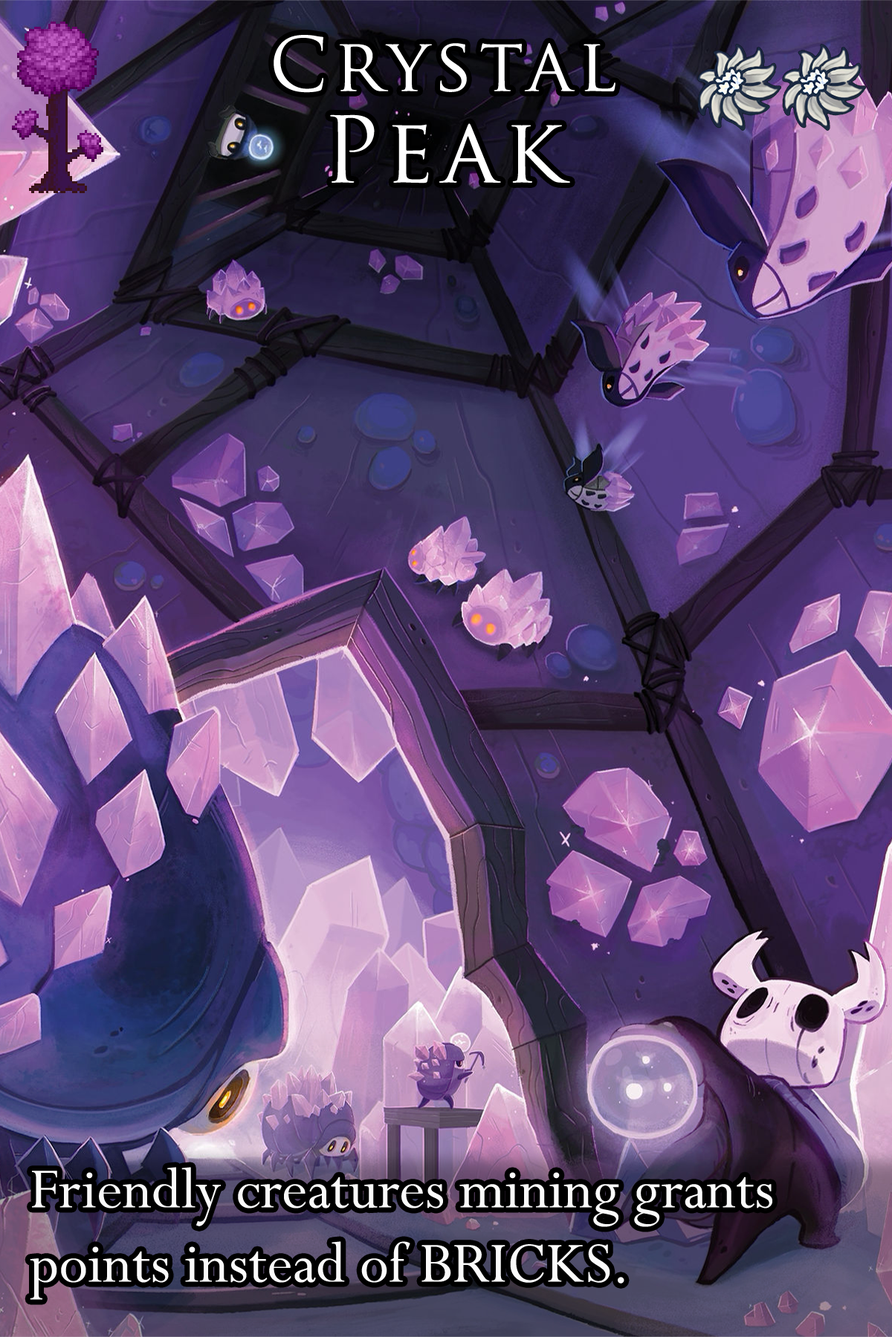
<style>
.page{position:relative;width:892px;height:1337px}
.page>*{position:absolute;margin:0}
.t1{font:125.1px/82.1px "TrajanPro-Regular";letter-spacing:0.08em;color:#ffffff}
.t2{font:153.1px/82.1px "TrajanPro-Regular";letter-spacing:0.08em;color:#ffffff}
.t3{font:109.2px "Perpetua";color:#fbfbfb}
</style>
<div class="page">
<p class="t1" style="left:273px;top:35px;width:342px;height:149px;text-align:center">Crystal<br><span class="t2">Peak</span></p>
<p class="t3" style="left:30px;top:1167px;width:742px;height:133px">Friendly creatures mining grants points instead of BRICKS.</p>
</div>
